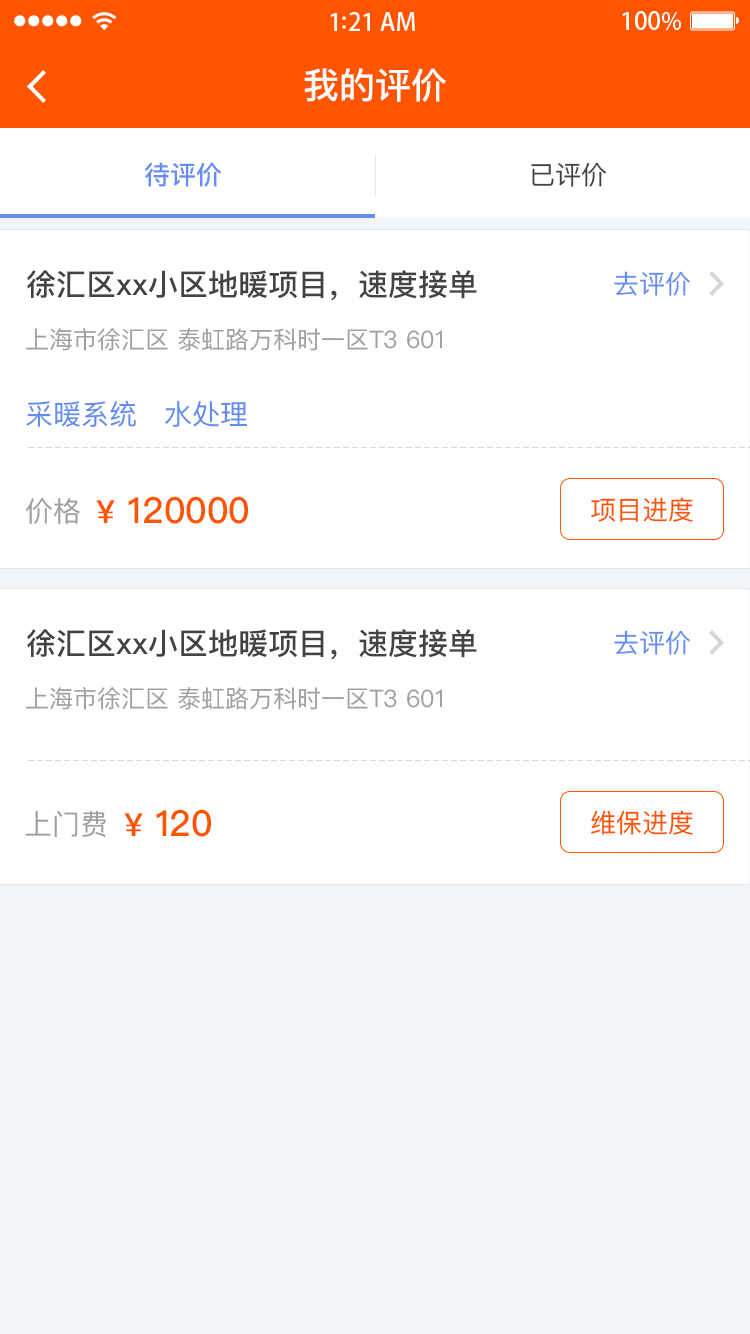
<style>
.page{position:relative;width:750px;height:1334px;background:#ffffff}
.page>*{position:absolute;margin:0}
.t1{font:36px "PingFangSC-Medium";color:#ffffff}
.t2{font:26px "PingFangSC-Medium";color:#648df6}
.t3{font:26px "PingFangSC-Regular";color:#434343}
.t4{font:30px "PingFangSC-Medium";color:#434343}
.t5{font:26px "PingFangSC-Regular";color:#648df6}
.t6{font:24px "PingFangSC-Regular";color:#a0a0a0}
.t7{font:28px "PingFangSC-Regular";color:#648df4}
.t8{font:36px "PingFangSC-Medium";color:#ff5400}
.t9{font:32px "PingFangSC-Medium";color:#ff5400}
.t10{font:26px "PingFangSC-Regular";color:#ff5400}
.t11{font:28px "PingFangSC-Regular";color:#a0a0a0}
</style>
<div class="page">
<p class="t1" style="left:304px;top:68px;width:142px;height:34px">我的评价</p>
<p class="t2" style="left:145px;top:162px;width:77px;height:25px">待评价</p>
<p class="t3" style="left:531px;top:162px;width:75px;height:25px">已评价</p>
<p class="t4" style="left:27px;top:270px;width:450px;height:31px">徐汇区xx小区地暖项目，速度接单</p>
<p class="t5" style="left:614px;top:271px;width:76px;height:25px">去评价</p>
<p class="t6" style="left:26px;top:328px;width:416px;height:23px">上海市徐汇区 泰虹路万科时一区T3 601</p>
<p class="t7" style="left:26px;top:400px;width:110px;height:27px">采暖系统</p>
<p class="t7" style="left:165px;top:400px;width:82px;height:27px">水处理</p>
<p class="t8" style="left:96px;top:496px;width:152px;height:28px"><span class="t9">¥</span> 120000</p>
<p class="t10" style="left:591px;top:497px;width:102px;height:25px">项目进度</p>
<p class="t11" style="left:26px;top:498px;width:54px;height:26px">价格</p>
<p class="t4" style="left:27px;top:629px;width:450px;height:31px">徐汇区xx小区地暖项目，速度接单</p>
<p class="t5" style="left:614px;top:630px;width:76px;height:25px">去评价</p>
<p class="t6" style="left:26px;top:687px;width:416px;height:23px">上海市徐汇区 泰虹路万科时一区T3 601</p>
<p class="t8" style="left:124px;top:809px;width:87px;height:28px"><span class="t9">¥</span> 120</p>
<p class="t11" style="left:25px;top:810px;width:81px;height:27px">上门费</p>
<p class="t10" style="left:591px;top:810px;width:102px;height:25px">维保进度</p>
</div>
